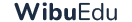
<style>
.page{position:relative;width:132px;height:22px;background:#ffffff}
.page>*{position:absolute;margin:0}
.t1{font:24px "Nunito-ExtraBold";color:#1c2d41}
.t2{font:24px "Nunito-Regular";color:#1c2d41}
</style>
<div class="page">
<p class="t1" style="left:14px;top:2px;width:103px;height:19px">Wibu<span class="t2">Edu</span></p>
</div>
